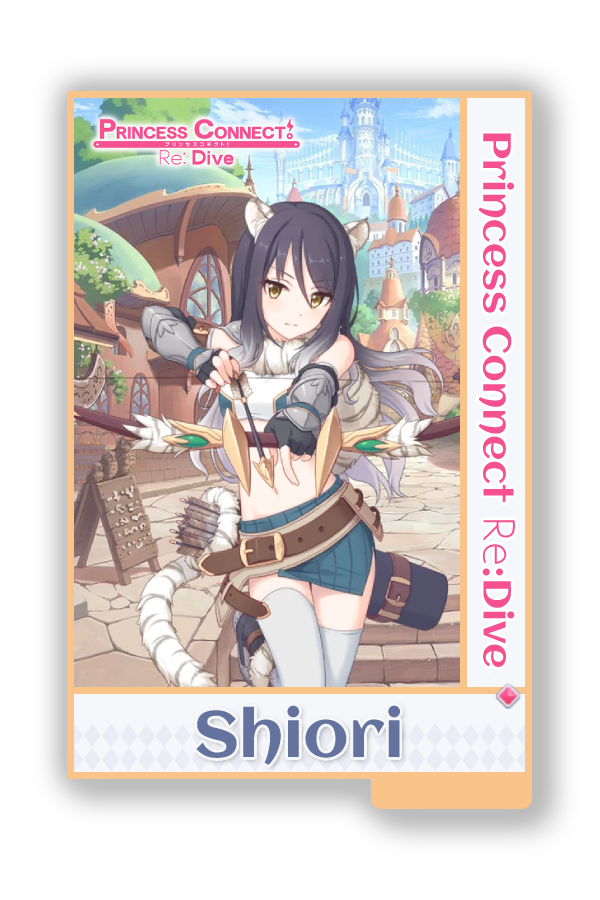
<style>
.page{position:relative;width:600px;height:900px;background:#ffffff}
.page>*{position:absolute;margin:0}
.t1{font:39px "Aclonica-Regular";color:#f55191}
.t2{font:39px "AaarghNormal";color:#f55191}
.t3{font:65px "Aclonica-Regular";color:#64739d}
</style>
<div class="page">
<p class="t1" style="left:478px;top:133px;width:38px;height:534px;rotate:90deg">Princess Connect <span class="t2">Re</span>:Dive</p>
<p class="t3" style="left:196px;top:705px;width:205px;height:60px">Shiori</p>
</div>
